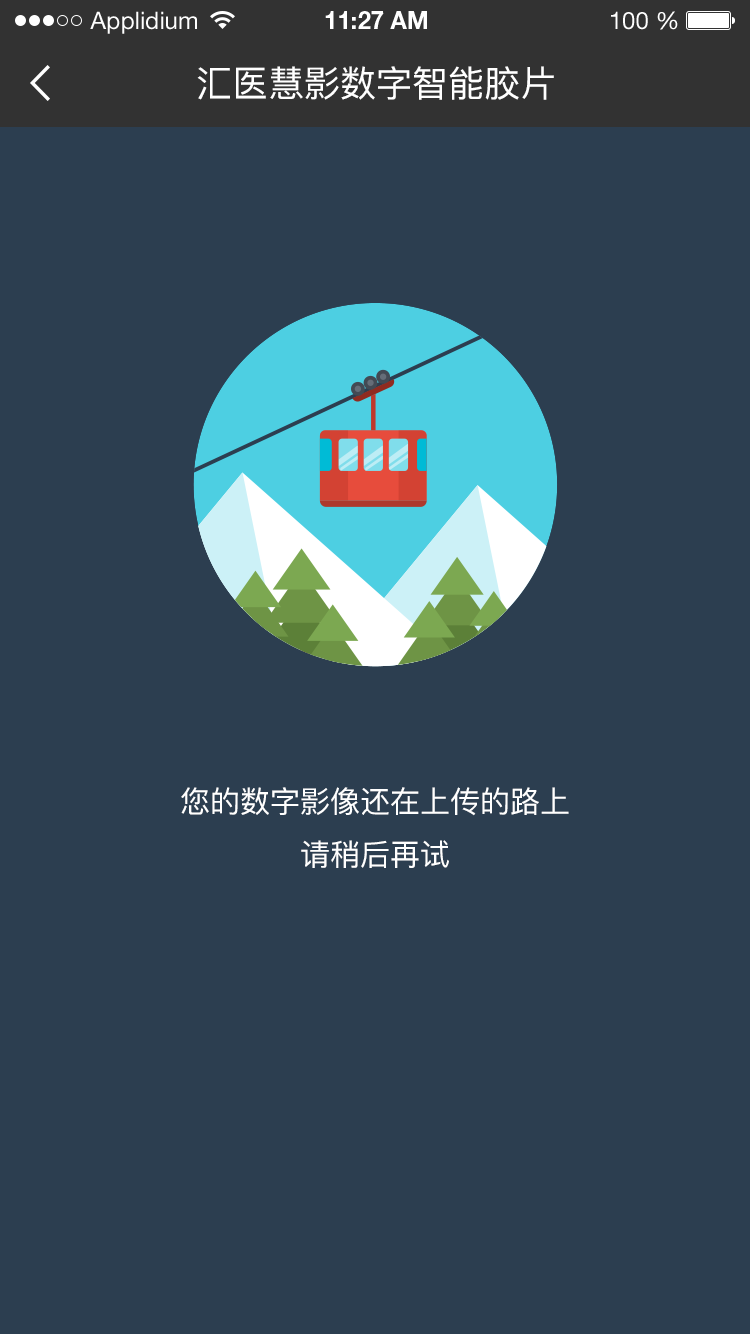
<style>
.page{position:relative;width:750px;height:1334px;background:#2c3e50}
.page>*{position:absolute;margin:0}
.t1{font:24px "HelveticaNeueLTStd-Roman";color:#ffffff}
.t2{font:24px "HelveticaNeueLTStd-Bd";color:#ffffff}
.t3{font:36px "PingFang-SC-Medium";color:#ffffff}
.t4{font:30px "PingFang-SC-Medium";color:#ffffff}
</style>
<div class="page">
<p class="t1" style="left:90px;top:11px;width:107px;height:23px">Applidium</p>
<p class="t2" style="left:325px;top:11px;width:102px;height:18px">11:27 AM</p>
<p class="t1" style="left:611px;top:11px;width:67px;height:19px">100 %</p>
<p class="t3" style="left:197px;top:66px;width:357px;height:34px">汇医慧影数字智能胶片</p>
<p class="t4" style="left:181px;top:787px;width:388px;height:81px;text-align:center">您的数字影像还在上传的路上<br>请稍后再试</p>
</div>
